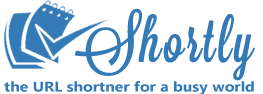
<style>
.page{position:relative;width:263px;height:94px;background:#ffffff}
.page>*{position:absolute;margin:0}
.t1{font:60px "Lavanderia-Sturdy";letter-spacing:0.05em;color:#337ab7}
.t2{font:14px "MicrosoftNewTaiLue-Bold";color:#337ab7;scale:1.13 1}
</style>
<div class="page">
<p class="t1" style="left:74px;top:8px;width:181px;height:73px">Shortly</p>
<p class="t2" style="left:4px;top:81px;width:250px;height:14px">the URL shortner for a busy world</p>
</div>
